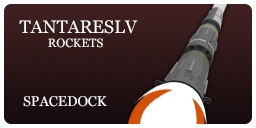
<style>
.page{position:relative;width:256px;height:128px}
.page>*{position:absolute;margin:0}
.t1{font:18px "Georgia";color:#ffffff}
.t2{font:12px "Georgia";color:#ffffff}
.t3{font:14px "Georgia";color:#ffffff}
</style>
<div class="page">
<p class="t1" style="left:19px;top:20px;width:119px;height:14px">TANTARESLV</p>
<p class="t2" style="left:48px;top:38px;width:55px;height:10px">ROCKETS</p>
<p class="t3" style="left:23px;top:96px;width:84px;height:11px">SPACEDOCK</p>
</div>
